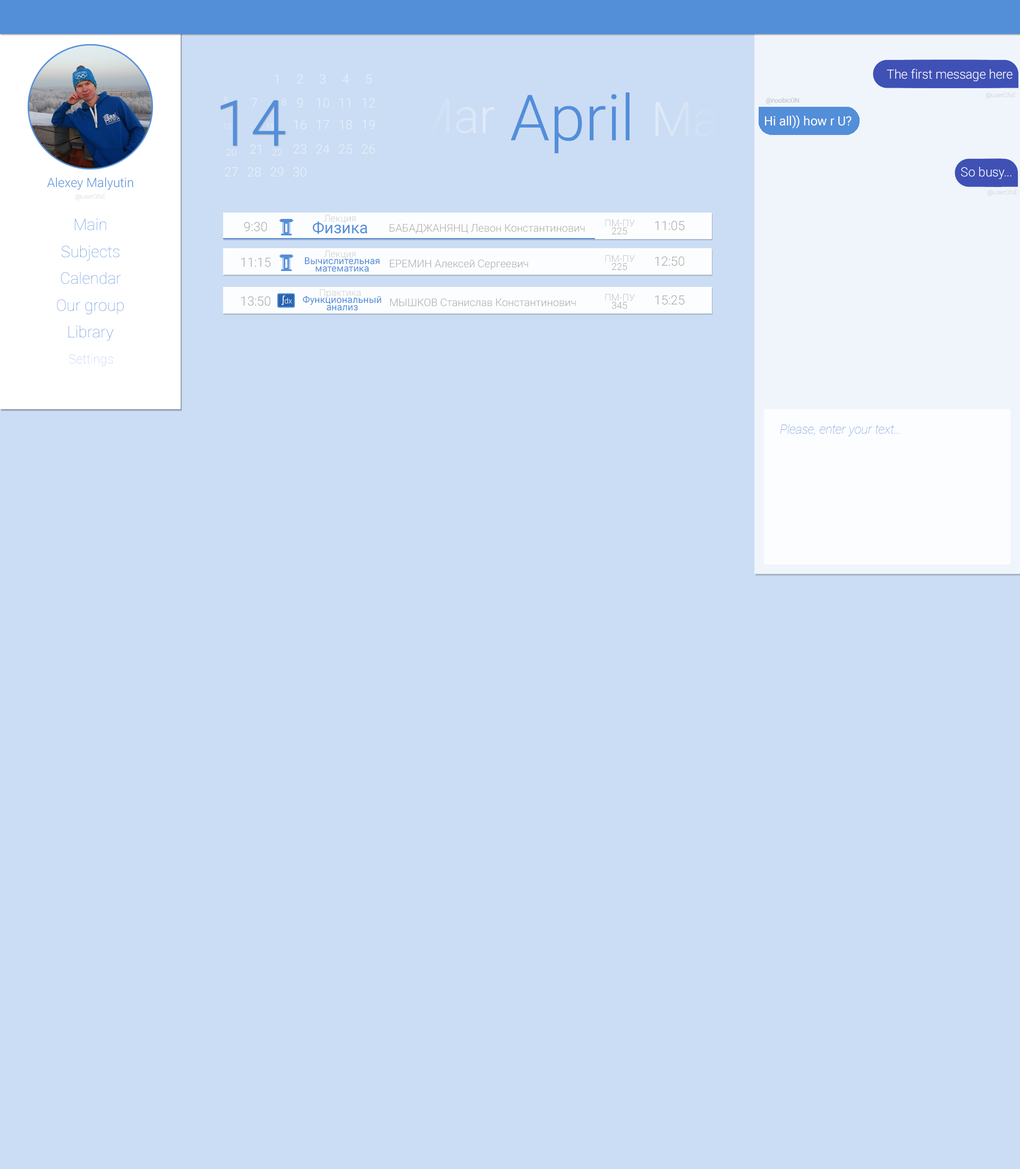
<style>
.page{position:relative;width:1020px;height:1169px;background:#cbddf4}
.page>*{position:absolute;margin:0}
.t1{font:12.8px "Roboto-Light";color:#fcfdfe}
.t2{font:12.8px "Roboto-Light";color:#ffffff}
.t3{font:63.8px "Roboto-Light";color:#538ed9}
.t4{font:7.4px "Roboto-Light"}
.t5{font:9.6px "Roboto-Light";color:#fcfdfe}
.t6{font:47.8px "Roboto-Light";color:#d3e2f6}
.t7{font:6.4px "Roboto-Light";color:#959696}
.t8{font:6.4px "Roboto-Thin"}
.t9{font:47.8px "Roboto-Light";color:#d5e3f6}
.t10{font:7.4px "Roboto-Light";color:#fcfdfe}
.t11{font:12.8px "Roboto-Regular";color:#fcfdfe}
.t12{font:12.8px "Roboto-Light";color:#538ed9}
.t13{font:15.9px "Roboto-Thin";color:#538ed9}
.t14{font:12.8px "Roboto-Light";color:#ababab}
.t15{font:15.9px "Roboto-Regular";color:#538ed9}
.t16{font:9.6px "Roboto-Light";color:#cececf}
.t17{font:9.6px "Roboto-Light";color:#c5c6c6}
.t18{font:10.6px "Roboto-Light";color:#ababab}
.t19{font:9.6px "Roboto-Light";color:#ababab}
.t20{font:9.6px/7.4px "Roboto-Regular";color:#538ed9}
.t21{font:9.6px "Roboto-Light";color:#fdfcfc}
.t22{font:7.4px "Roboto-Light";color:#fdfcfc}
.t23{font:12.8px "Roboto-Thin"}
.t24{font:12.8px "Roboto-ThinItalic";color:#538ed9}
</style>
<div class="page">
<p class="t1" style="left:275px;top:74px;width:3px;height:9px;opacity:0.6">1</p>
<p class="t1" style="left:297px;top:74px;width:6px;height:9px;opacity:0.6">2</p>
<p class="t1" style="left:320px;top:74px;width:6px;height:10px;opacity:0.6">3</p>
<p class="t1" style="left:342px;top:74px;width:7px;height:9px;opacity:0.6">4</p>
<p class="t1" style="left:366px;top:74px;width:6px;height:10px;opacity:0.6">5</p>
<p class="t2" style="left:887px;top:69px;width:126px;height:12px">The first message here</p>
<p class="t3" style="left:220px;top:100px;width:65px;height:46px">14</p>
<p class="t4" style="left:224px;top:96px;width:4px;height:5px">6</p>
<p class="t1" style="left:251px;top:98px;width:6px;height:9px;opacity:0.6">7</p>
<p class="t5" style="left:282px;top:98px;width:4px;height:8px;opacity:0.6">8</p>
<p class="t1" style="left:297px;top:98px;width:6px;height:10px;opacity:0.6">9</p>
<p class="t1" style="left:317px;top:98px;width:12px;height:10px;opacity:0.6">10</p>
<p class="t1" style="left:340px;top:98px;width:10px;height:9px;opacity:0.6">11</p>
<p class="t1" style="left:362px;top:98px;width:13px;height:9px;opacity:0.6">12</p>
<p class="t6" style="left:417px;top:99px;width:78px;height:34px">Mar</p>
<p class="t3" style="left:511px;top:92px;width:119px;height:62px">April</p>
<p class="t7" style="left:766px;top:98px;width:33px;height:6px">@noobicON</p>
<p class="t8" style="left:986px;top:92px;width:30px;height:7px">@userONE</p>
<p class="t9" style="left:656px;top:102px;width:85px;height:45px">May</p>
<p class="t4" style="left:224px;top:123px;width:7px;height:6px">13</p>
<p class="t10" style="left:266px;top:123px;width:8px;height:6px;opacity:0.6">15</p>
<p class="t1" style="left:294px;top:120px;width:13px;height:10px;opacity:0.6">16</p>
<p class="t1" style="left:317px;top:120px;width:12px;height:9px;opacity:0.6">17</p>
<p class="t1" style="left:340px;top:120px;width:12px;height:10px;opacity:0.6">18</p>
<p class="t1" style="left:362px;top:120px;width:13px;height:10px;opacity:0.6">19</p>
<p class="t11" style="left:765px;top:115px;width:87px;height:14px">Hi all)) how r U?</p>
<p class="t5" style="left:226px;top:149px;width:10px;height:7px;opacity:0.6">20</p>
<p class="t1" style="left:250px;top:144px;width:11px;height:10px;opacity:0.6">21</p>
<p class="t5" style="left:272px;top:149px;width:10px;height:7px;opacity:0.6">22</p>
<p class="t1" style="left:293px;top:144px;width:14px;height:10px;opacity:0.6">23</p>
<p class="t1" style="left:316px;top:144px;width:14px;height:10px;opacity:0.6">24</p>
<p class="t1" style="left:339px;top:144px;width:13px;height:10px;opacity:0.6">25</p>
<p class="t1" style="left:362px;top:144px;width:13px;height:10px;opacity:0.6">26</p>
<p class="t1" style="left:225px;top:167px;width:13px;height:9px;opacity:0.6">27</p>
<p class="t1" style="left:248px;top:167px;width:13px;height:10px;opacity:0.6">28</p>
<p class="t1" style="left:270px;top:167px;width:14px;height:10px;opacity:0.6">29</p>
<p class="t1" style="left:293px;top:167px;width:14px;height:10px;opacity:0.6">30</p>
<p class="t1" style="left:961px;top:167px;width:51px;height:12px">So busy...</p>
<p class="t12" style="left:47px;top:177px;width:86px;height:13px">Alexey Malyutin</p>
<p class="t8" style="left:75px;top:194px;width:30px;height:6px">@userONE</p>
<p class="t8" style="left:988px;top:190px;width:29px;height:6px">@userONE</p>
<p class="t13" style="left:75px;top:218px;width:31px;height:13px">Main</p>
<p class="t14" style="left:244px;top:222px;width:23px;height:10px">9:30</p>
<p class="t15" style="left:312px;top:221px;width:56px;height:13px">Физика</p>
<p class="t16" style="left:324px;top:215px;width:32px;height:8px">Лекция</p>
<p class="t17" style="left:605px;top:219px;width:30px;height:8px">ПМ-ПУ</p>
<p class="t14" style="left:655px;top:220px;width:30px;height:11px">11:05</p>
<p class="t18" style="left:389px;top:224px;width:196px;height:10px">БАБАДЖАНЯНЦ Левон Константинович</p>
<p class="t19" style="left:612px;top:227px;width:15px;height:8px">225</p>
<p class="t13" style="left:62px;top:245px;width:58px;height:16px">Subjects</p>
<p class="t14" style="left:241px;top:258px;width:30px;height:9px">11:15</p>
<p class="t20" style="left:305px;top:257px;width:75px;height:15px;text-align:center">Вычислительная <br>математика</p>
<p class="t16" style="left:324px;top:250px;width:32px;height:9px">Лекция</p>
<p class="t17" style="left:605px;top:255px;width:30px;height:7px">ПМ-ПУ</p>
<p class="t14" style="left:655px;top:256px;width:29px;height:10px">12:50</p>
<p class="t18" style="left:390px;top:259px;width:138px;height:10px">ЕРЕМИН Алексей Сергеевич</p>
<p class="t19" style="left:612px;top:263px;width:15px;height:7px">225</p>
<p class="t13" style="left:61px;top:272px;width:60px;height:12px">Calendar</p>
<p class="t16" style="left:320px;top:289px;width:41px;height:9px">Практика</p>
<p class="t17" style="left:605px;top:294px;width:30px;height:7px">ПМ-ПУ</p>
<p class="t13" style="left:57px;top:299px;width:67px;height:16px">Our group</p>
<p class="t14" style="left:241px;top:296px;width:29px;height:10px">13:50</p>
<p class="t21" style="left:282px;top:295px;width:3px;height:10px">∫</p>
<p class="t22" style="left:285px;top:298px;width:7px;height:6px">dx</p>
<p class="t20" style="left:303px;top:295px;width:78px;height:16px;text-align:center">Функциональный<br>анализ</p>
<p class="t18" style="left:390px;top:298px;width:186px;height:9px">МЫШКОВ Станислав Константинович</p>
<p class="t19" style="left:612px;top:302px;width:15px;height:7px">345</p>
<p class="t14" style="left:655px;top:295px;width:30px;height:10px">15:25</p>
<p class="t13" style="left:69px;top:325px;width:45px;height:16px">Library</p>
<p class="t23" style="left:69px;top:354px;width:44px;height:12px">Settings</p>
<p class="t24" style="left:781px;top:424px;width:119px;height:12px">Please, enter your text...</p>
</div>
